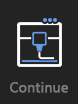
<style>
.page{position:relative;width:78px;height:104px;background:#232323}
.page>*{position:absolute;margin:0}
.t1{font:14px "SegoeUI";color:#7c7c7c;font-weight:bold}
</style>
<div class="page">
<p class="t1" style="left:10px;top:82px;width:58px;height:11px">Continue</p>
</div>
